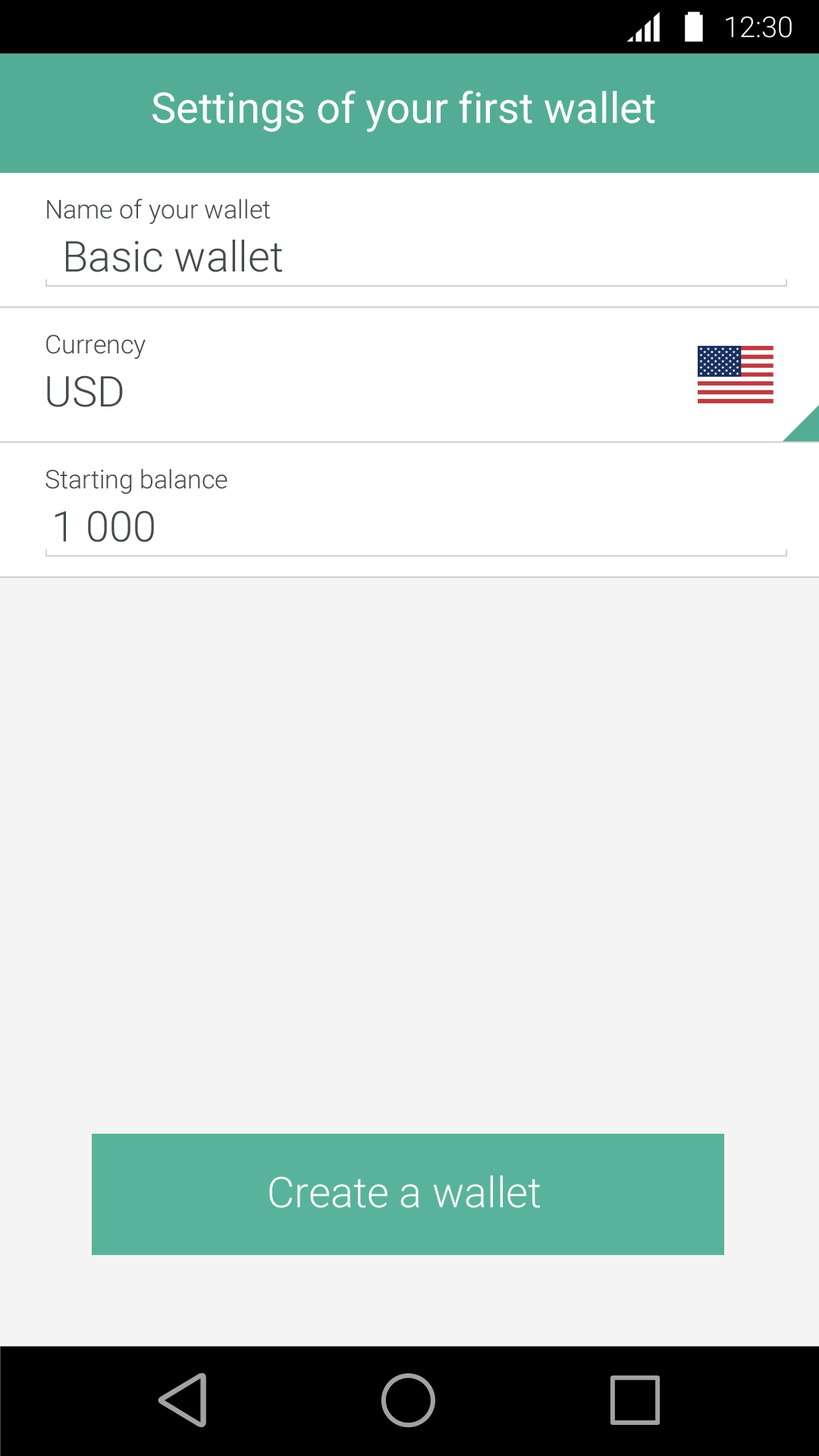
<style>
.page{position:relative;width:819px;height:1456px;background:#f4f4f4}
.page>*{position:absolute;margin:0}
.t1{font:28.8px "Roboto-Light";color:#ffffff}
.t2{font:42.5px "Roboto-Regular";color:#ffffff}
.t3{font:25.8px "Roboto-Light";color:#454b4d}
.t4{font:42.5px "Roboto-Light";color:#454b4d}
.t5{font:42.5px "Roboto-Light";color:#ffffff}
</style>
<div class="page">
<p class="t1" style="left:726px;top:16px;width:66px;height:22px">12:30</p>
<p class="t2" style="left:152px;top:90px;width:503px;height:42px">Settings of your first wallet</p>
<p class="t3" style="left:47px;top:199px;width:223px;height:25px">Name of your wallet</p>
<p class="t4" style="left:66px;top:240px;width:216px;height:32px">Basic wallet</p>
<p class="t3" style="left:46px;top:334px;width:100px;height:25px">Currency</p>
<p class="t4" style="left:47px;top:375px;width:76px;height:32px">USD</p>
<p class="t3" style="left:45px;top:469px;width:182px;height:25px">Starting balance</p>
<p class="t4" style="left:55px;top:510px;width:99px;height:32px">1 000</p>
<p class="t5" style="left:269px;top:1175px;width:271px;height:33px">Create a wallet</p>
</div>
